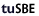
<style>
.page{position:relative;width:39px;height:16px;background:#ffffff}
.page>*{position:absolute;margin:0}
.t1{font:12px "AdobeGothicStd-Bold";letter-spacing:-0.025em;color:#000000}
</style>
<div class="page">
<p class="t1" style="left:15px;top:3px;width:20px;height:11px">SBE</p>
</div>
